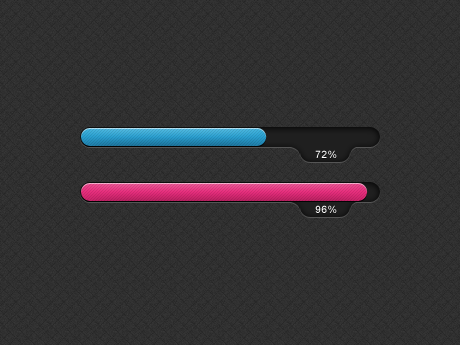
<style>
.page{position:relative;width:460px;height:345px;background:#323232}
.page>*{position:absolute;margin:0}
.t1{font:10px "ArialMT";letter-spacing:0.025em;color:#ffffff}
</style>
<div class="page">
<p class="t1" style="left:315px;top:150px;width:22px;height:8px">72%</p>
<p class="t1" style="left:315px;top:205px;width:22px;height:8px">96%</p>
</div>
